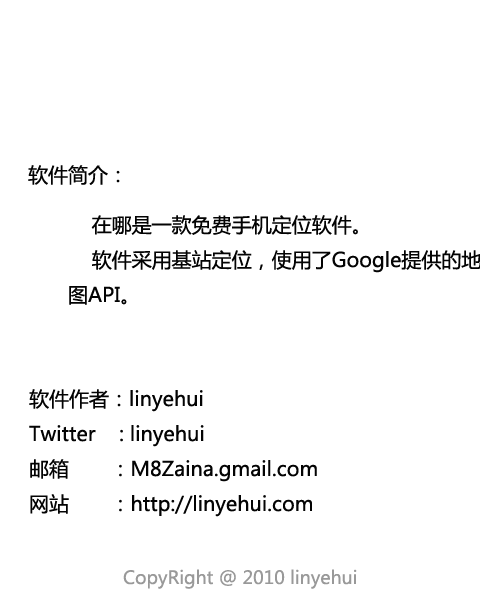
<style>
.page{position:relative;width:480px;height:614px;background:#ffffff}
.page>*{position:absolute;margin:0}
.t1{font:20px "MicrosoftYaHei";color:#030303}
.t2{font:18px "MicrosoftYaHei";color:#999999}
</style>
<div class="page">
<p class="t1" style="left:28px;top:165px;width:92px;height:20px">软件简介：</p>
<p class="t1" style="left:69px;top:215px;width:413px;height:90px">在哪是一款免费手机定位软件。<br>    软件采用基站定位，使用了Google提供的地<br>图API。</p>
<p class="t1" style="left:29px;top:389px;width:288px;height:128px">软件作者：linyehui<br>Twitter    : linyehui<br>邮箱       ：M8Zaina.gmail.com<br>网站       ：http://linyehui.com</p>
<p class="t2" style="left:123px;top:569px;width:234px;height:20px">CopyRight @ 2010 linyehui</p>
</div>
